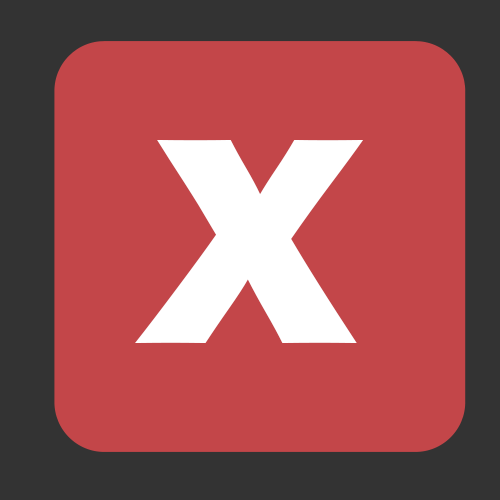
<style>
.page{position:relative;width:500px;height:500px;background:#c34649}
.page>*{position:absolute;margin:0}
.t1{font:305.5px "ErasITC-Bold";color:#ffffff}
</style>
<div class="page">
<p class="t1" style="left:135px;top:140px;width:228px;height:203px">X</p>
</div>
